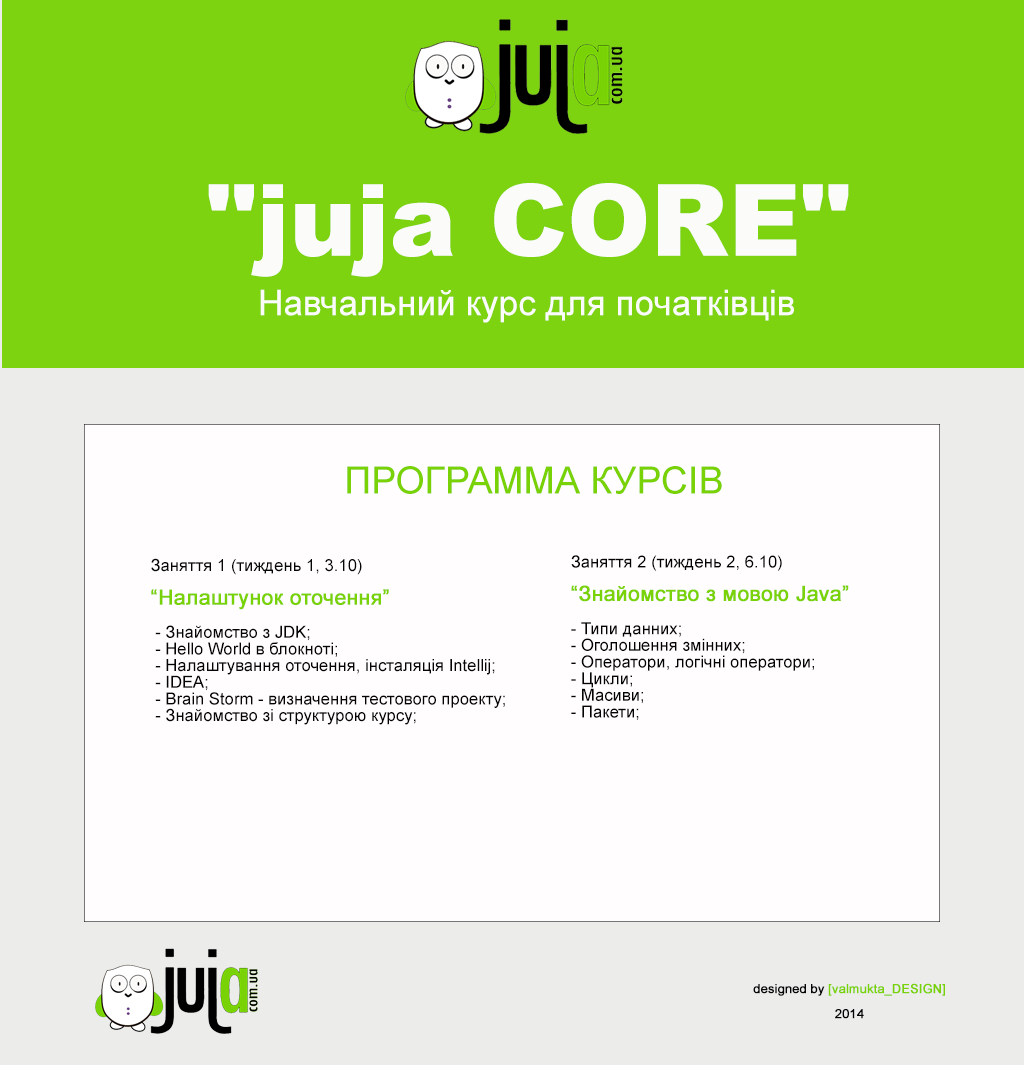
<style>
.page{position:relative;width:1024px;height:1065px;background:#fffdfd}
.page>*{position:absolute;margin:0}
.t1{font:100px "Arial-Black";color:#fbfcf9}
.t2{font:35.4px "ArialMT";color:#fbfcf9}
.t3{font:37.5px "ArialMT";color:#79d206}
.t4{font:16.7px/16.7px "ArialMT";color:#040404}
.t5{font:16.7px/16.7px "ArialMT";color:#060606}
.t6{font:20.8px/16.7px "ArialMT";color:#79d206;font-weight:bold}
.t7{font:16.7px/16.7px "ArialMT";color:#020202}
.t8{font:20.8px/16.7px "ArialMT";color:#7ad208;font-weight:bold}
.t9{font:12.5px/25px "ArialMT";color:#79d206;font-weight:bold}
.t10{font:12.5px/25px "ArialMT";color:#060606;font-weight:bold}
.t11{font:12.5px/25px "ArialMT";color:#010101;font-weight:bold}
</style>
<div class="page">
<p class="t1" style="left:208px;top:183px;width:641px;height:94px">"juja CORE"</p>
<p class="t2" style="left:260px;top:289px;width:534px;height:34px">Навчальний курс для початківців</p>
<p class="t3" style="left:347px;top:466px;width:375px;height:28px">ПРОГРАММА КУРСІВ</p>
<p class="t4" style="left:151px;top:558px;width:354px;height:167px"><span class="t5">Заняття 1 (тиждень 1, 3.10) <br><br></span><span class="t6">“Налаштунок оточення”<br><br></span> - Знайомство з JDK;<br> - Hello World в блокноті;<br> - Налаштування оточення, інсталяція Intellij; <br> - IDEA;<br> - Brain Storm - визначення тестового проекту;<br> - Знайомство зі структурою курсу;</p>
<p class="t7" style="left:571px;top:555px;width:278px;height:165px">Заняття 2 (тиждень 2, 6.10) <br><br><span class="t8">“Знайомство з мовою Java”<br><br></span>- Типи данних;<br>- Оголошення змінних;<br>- Оператори, логічні оператори;<br>- Цикли;<br>- Масиви;<br>- Пакети;</p>
<p class="t9" style="left:753px;top:983px;width:192px;height:36px;text-align:center"><span class="t10">designed by </span>[valmukta_DESIGN] <br><span class="t11">2014</span></p>
</div>
